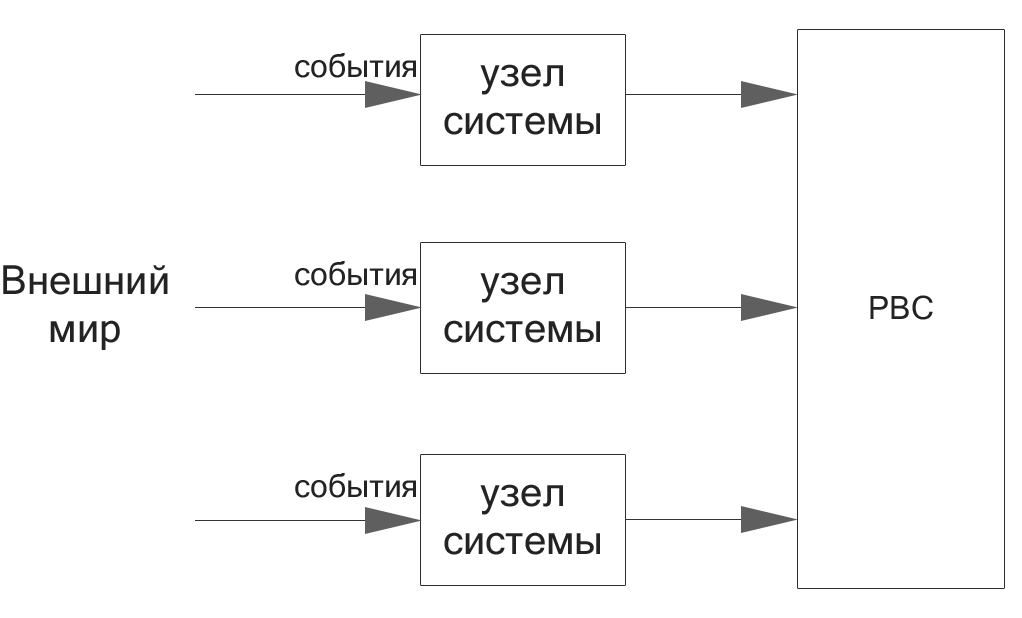
<style>
.page{position:relative;width:1022px;height:618px;background:#ffffff}
.page>*{position:absolute;margin:0}
.t1{font:32px "MicrosoftSansSerif";color:#232323}
.t2{font:40px "MicrosoftSansSerif";color:#232323}
</style>
<div class="page">
<p class="t1" style="left:295px;top:53px;width:121px;height:25px">события</p>
<p class="t2" style="left:444px;top:64px;width:156px;height:71px;text-align:center">узел<br>системы</p>
<p class="t2" style="left:3px;top:265px;width:165px;height:85px;text-align:center">Внешний<br>мир</p>
<p class="t1" style="left:295px;top:261px;width:121px;height:25px">события</p>
<p class="t2" style="left:444px;top:272px;width:156px;height:71px;text-align:center">узел<br>системы</p>
<p class="t1" style="left:870px;top:295px;width:63px;height:25px">РВС</p>
<p class="t1" style="left:295px;top:473px;width:121px;height:25px">события</p>
<p class="t2" style="left:444px;top:484px;width:156px;height:71px;text-align:center">узел<br>системы</p>
</div>
